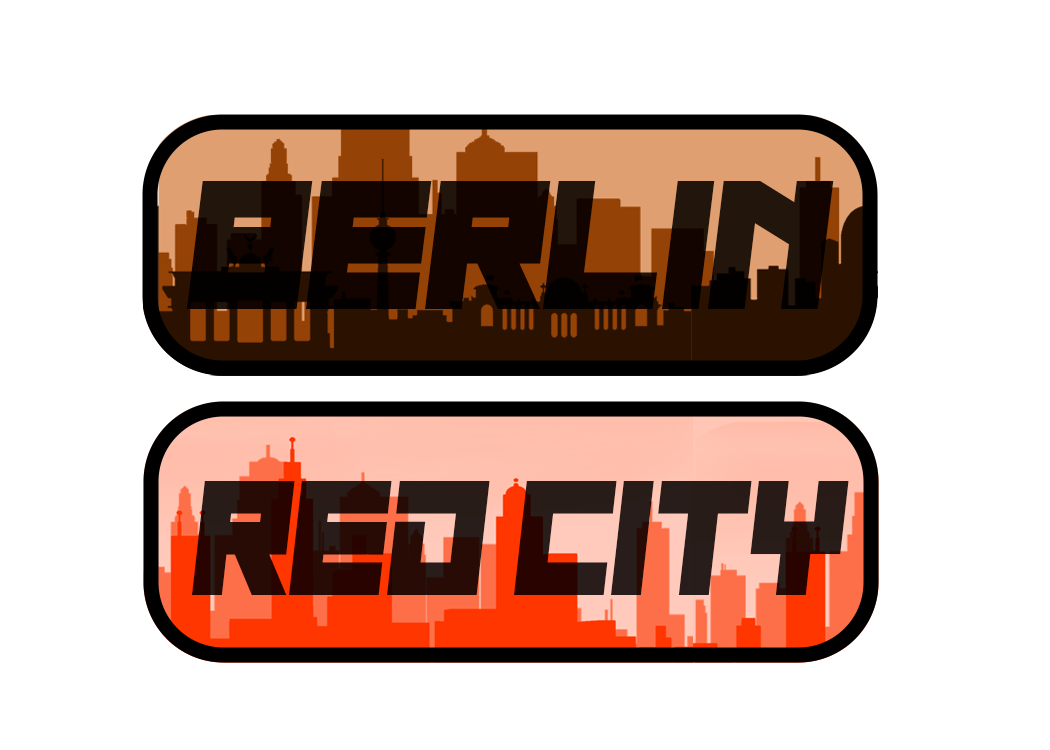
<style>
.page{position:relative;width:1050px;height:750px;background:#ffffff}
.page>*{position:absolute;margin:0}
.t1{font:187px "NauSea";color:#000000}
.t2{font:166.5px "NauSea";color:#281813;scale:0.92 1}
</style>
<div class="page">
<p class="t1" style="left:187px;top:181px;width:647px;height:128px;opacity:0.93">berlin</p>
<p class="t2" style="left:192px;top:481px;width:657px;height:114px">red city</p>
</div>
